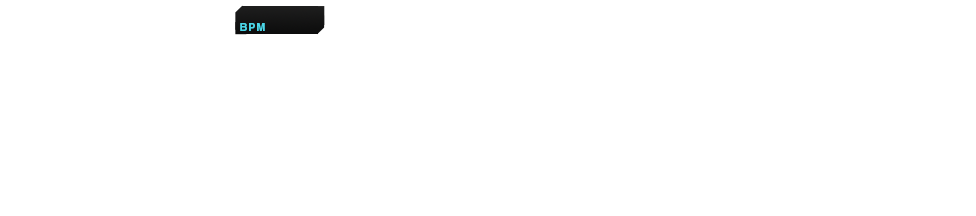
<style>
.page{position:relative;width:976px;height:216px;background:#ffffff}
.page>*{position:absolute;margin:0}
.t1{font:10.6px "Helvetica-Bold";letter-spacing:0.05em;color:#4bd6e8;scale:1.03 1}
</style>
<div class="page">
<p class="t1" style="left:240px;top:23px;width:25px;height:8px">BPM</p>
</div>
